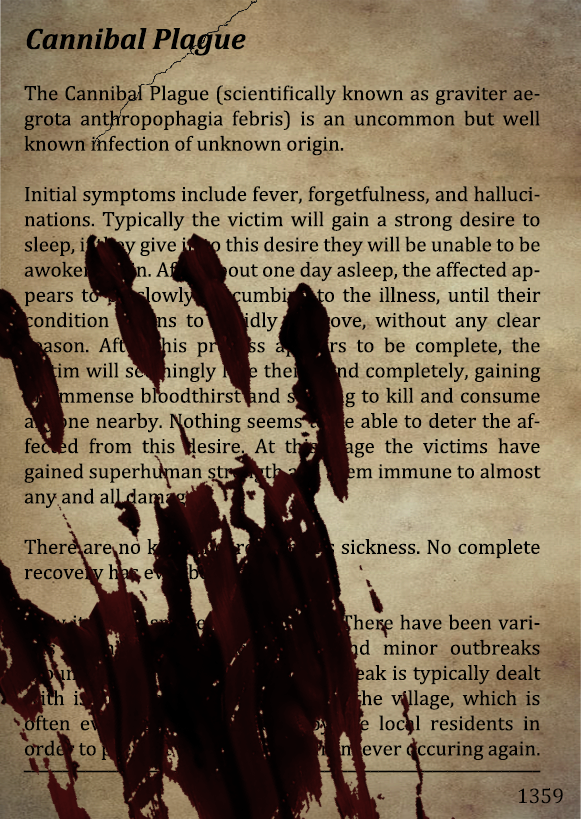
<style>
.page{position:relative;width:581px;height:819px}
.page>*{position:absolute;margin:0}
.t1{font:30px "Cambria-BoldItalic";color:#000000}
.t2{font:21px "Cambria";color:#000000}
.t3{font:21px "Arimo";color:#000000;scale:0.66 1}
.t4{font:21.5px "Cambria";color:#000000}
</style>
<div class="page">
<p class="t1" style="left:26px;top:28px;width:220px;height:28px">Cannibal Plague</p>
<p class="t2" style="left:24px;top:85px;width:517px;height:675px;text-align:justify">The Cannibal Plague (scientifically known as graviter aegrota anthropophagia febris) is an uncommon but well known infection of unknown origin.<br><br>Initial symptoms include fever, forgetfulness, and hallucinations. Typically the victim will gain a strong desire to sleep, if they give in to this desire they will be unable to be awoken again. After about one day asleep, the affected appears to be slowly succumbing to the illness, until their condition begins to rapidly improve, without any clear reason. After this process appears to be complete, the victim will seemingly lose their mind completely, gaining an immense bloodthirst and seeking to kill and consume anyone nearby. Nothing seems to be able to deter the affected from this desire. At this stage the victims have gained superhuman strength and seem immune to almost any and all damage.<br><br>There are no known cures for this sickness. No complete recovery has ever been observed.<br><br>How it is transmitted is unknown. There have been various seemingly unrelated larger and minor outbreaks around the world. The way an outbreak is typically dealt with is via complete anhiliation of the village, which is often even seen as necessary by the local residents in order to prevent *************** from ever occuring again.</p>
<p class="t3" style="left:23px;top:770px;width:518px;height:3px">___________________________________________________________________</p>
<p class="t4" style="left:518px;top:788px;width:45px;height:16px">1359</p>
</div>
